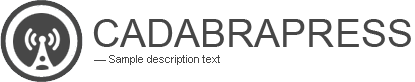
<style>
.page{position:relative;width:415px;height:82px;background:#ffffff}
.page>*{position:absolute;margin:0}
.t1{font:39px "ArialMT";color:#474747;text-transform:uppercase}
.t2{font:11px "ArialMT";color:#474747}
</style>
<div class="page">
<p class="t1" style="left:93px;top:19px;width:318px;height:28px">Cadabrapress</p>
<p class="t2" style="left:94px;top:55px;width:126px;height:10px">— Sample description text</p>
</div>
